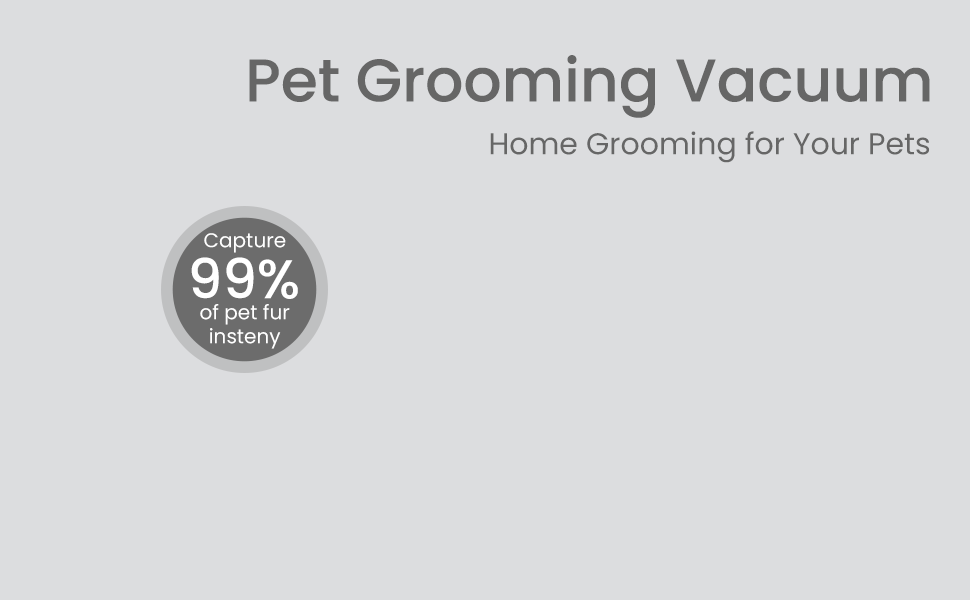
<style>
.page{position:relative;width:970px;height:600px;background:#dcdddf}
.page>*{position:absolute;margin:0}
.t1{font:60px "Poppins-Medium";color:#666666}
.t2{font:30px "Poppins-Regular";color:#666666}
.t3{font:20px "Poppins-Regular";color:#ffffff}
.t4{font:54.7px "Poppins-Medium";color:#ffffff}
</style>
<div class="page">
<p class="t1" style="left:249px;top:55px;width:681px;height:63px">Pet Grooming Vacuum</p>
<p class="t2" style="left:490px;top:131px;width:440px;height:32px">Home Grooming for Your Pets</p>
<p class="t3" style="left:204px;top:233px;width:82px;height:20px">Capture</p>
<p class="t4" style="left:191px;top:257px;width:107px;height:42px">99%</p>
<p class="t3" style="left:200px;top:304px;width:90px;height:45px;text-align:center">of pet fur<br>insteny</p>
</div>
